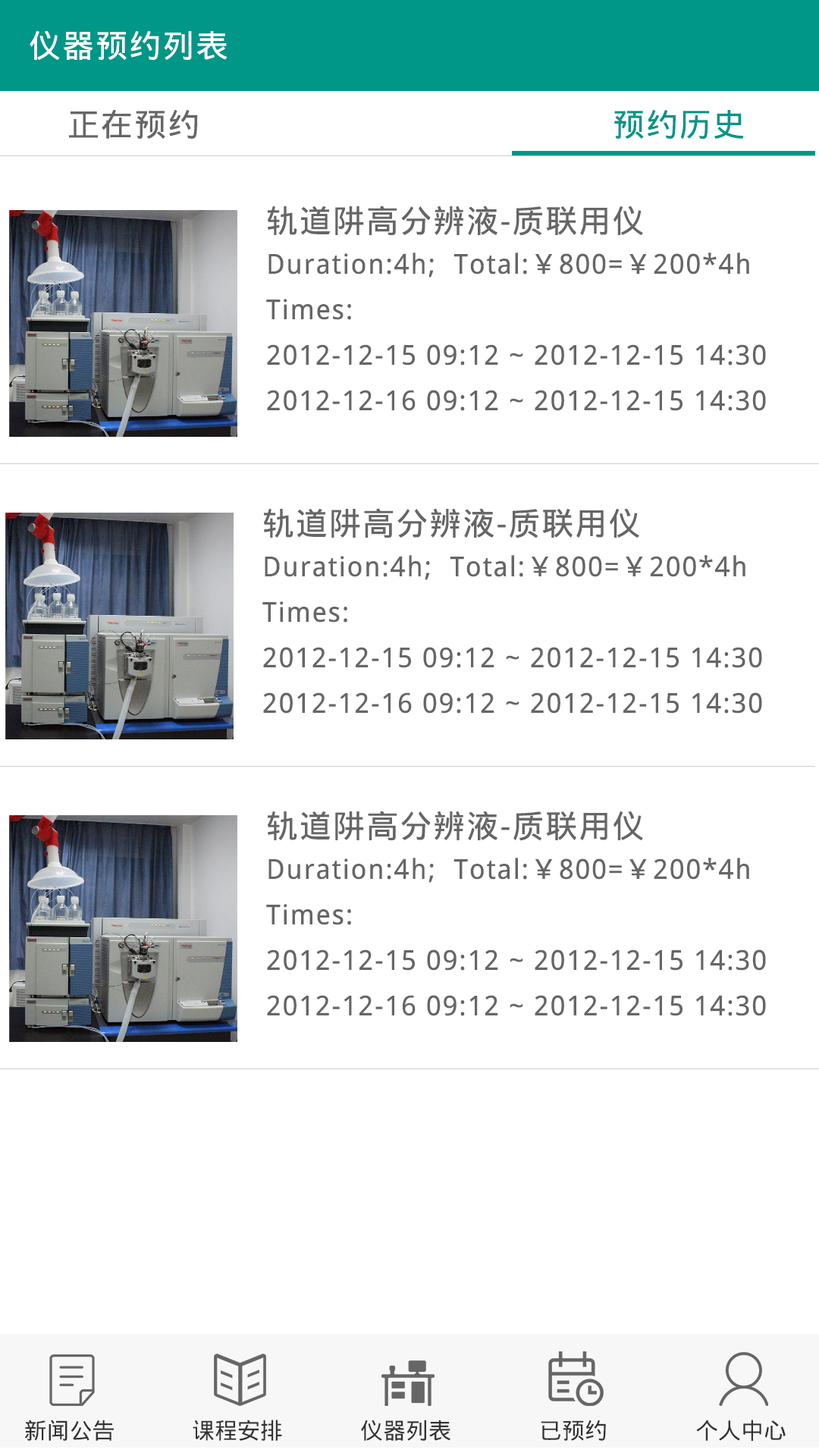
<style>
.page{position:relative;width:819px;height:1456px;background:#ffffff}
.page>*{position:absolute;margin:0}
.t1{font:31.8px "DroidSansFallback";letter-spacing:0.05em;color:#ffffff}
.t2{font:31.8px "DroidSansFallback";letter-spacing:0.05em;color:#666666}
.t3{font:31.8px "DroidSansFallback";letter-spacing:0.05em;color:#009688}
.t4{font:27.3px/45.5px "DroidSansFallback";letter-spacing:0.05em;color:#666666}
.t5{font:31.8px/45.5px "DroidSansFallback";letter-spacing:0.05em;color:#666666}
.t6{font:22.7px "DroidSansFallback";color:#333333}
</style>
<div class="page">
<p class="t1" style="left:30px;top:31px;width:197px;height:29px">仪器预约列表</p>
<p class="t2" style="left:69px;top:109px;width:129px;height:30px">正在预约</p>
<p class="t3" style="left:614px;top:110px;width:130px;height:29px">预约历史</p>
<p class="t4" style="left:266px;top:206px;width:500px;height:205px"><span class="t5">轨道阱高分辨液-质联用仪<br></span>Duration:4h;  Total:￥800=￥200*4h<br>Times:<br>2012-12-15 09:12 ~ 2012-12-15 14:30<br>2012-12-16 09:12 ~ 2012-12-15 14:30</p>
<p class="t4" style="left:262px;top:508px;width:500px;height:206px"><span class="t5">轨道阱高分辨液-质联用仪<br></span>Duration:4h;  Total:￥800=￥200*4h<br>Times:<br>2012-12-15 09:12 ~ 2012-12-15 14:30<br>2012-12-16 09:12 ~ 2012-12-15 14:30</p>
<p class="t4" style="left:266px;top:811px;width:500px;height:205px"><span class="t5">轨道阱高分辨液-质联用仪<br></span>Duration:4h;  Total:￥800=￥200*4h<br>Times:<br>2012-12-15 09:12 ~ 2012-12-15 14:30<br>2012-12-16 09:12 ~ 2012-12-15 14:30</p>
<p class="t6" style="left:24px;top:1420px;width:90px;height:21px">新闻公告</p>
<p class="t6" style="left:193px;top:1420px;width:89px;height:21px">课程安排</p>
<p class="t6" style="left:361px;top:1420px;width:89px;height:21px">仪器列表</p>
<p class="t6" style="left:541px;top:1420px;width:65px;height:21px">已预约</p>
<p class="t6" style="left:696px;top:1420px;width:90px;height:21px">个人中心</p>
</div>
